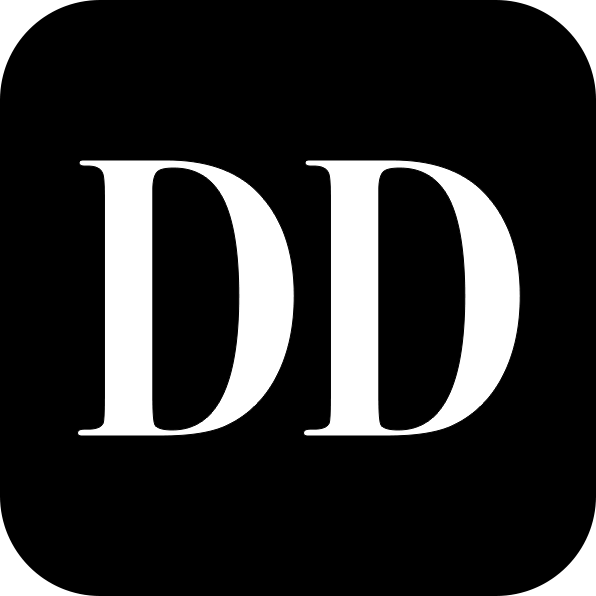
<style>
.page{position:relative;width:596px;height:596px;background:#000000}
.page>*{position:absolute;margin:0}
.t1{font:400px "BodoniSvtyTwoITCTT-Bold";color:#ffffff;scale:0.8 1}
</style>
<div class="page">
<p class="t1" style="left:77px;top:160px;width:218px;height:276px">D</p>
<p class="t1" style="left:303px;top:160px;width:218px;height:276px">D</p>
</div>
